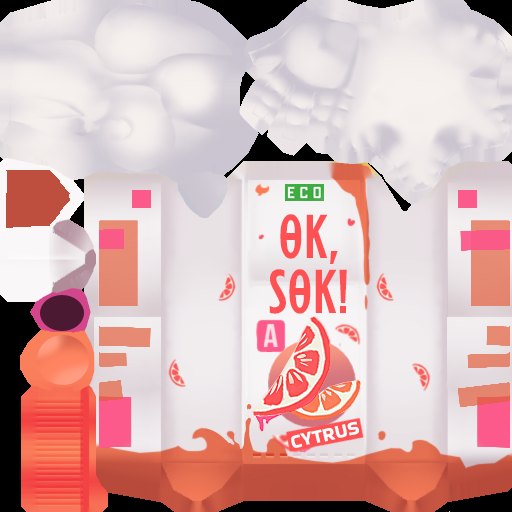
<style>
.page{position:relative;width:512px;height:512px}
.page>*{position:absolute;margin:0}
.t1{font:60px/55px "Osterbar";color:#fd5154}
.t2{font:19.6px "BakbakOne-Regular";color:#ffffff}
</style>
<div class="page">
<p class="t1" style="left:269px;top:214px;width:78px;height:100px;text-align:center">OK,<br>SOK!</p>
<p class="t2" style="left:291px;top:421px;width:68px;height:27px;rotate:-13deg">CYTRUS</p>
</div>
